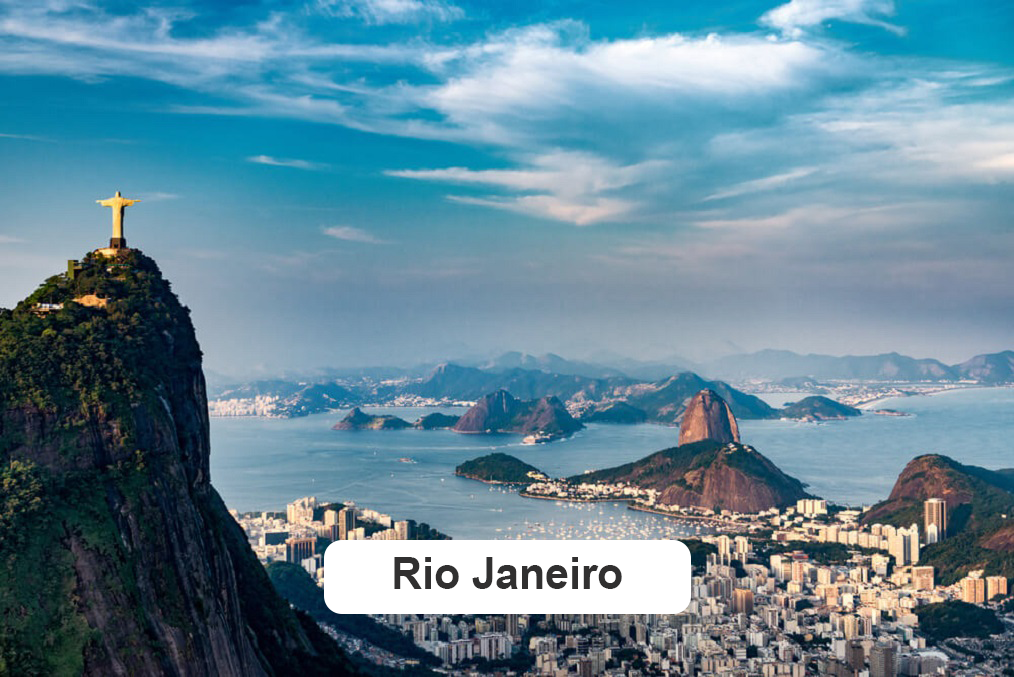
<style>
.page{position:relative;width:1014px;height:677px}
.page>*{position:absolute;margin:0}
.t1{font:43.9px "Arial-BoldMT";color:#313030}
</style>
<div class="page">
<p class="t1" style="left:394px;top:557px;width:228px;height:32px">Rio Janeiro</p>
</div>
